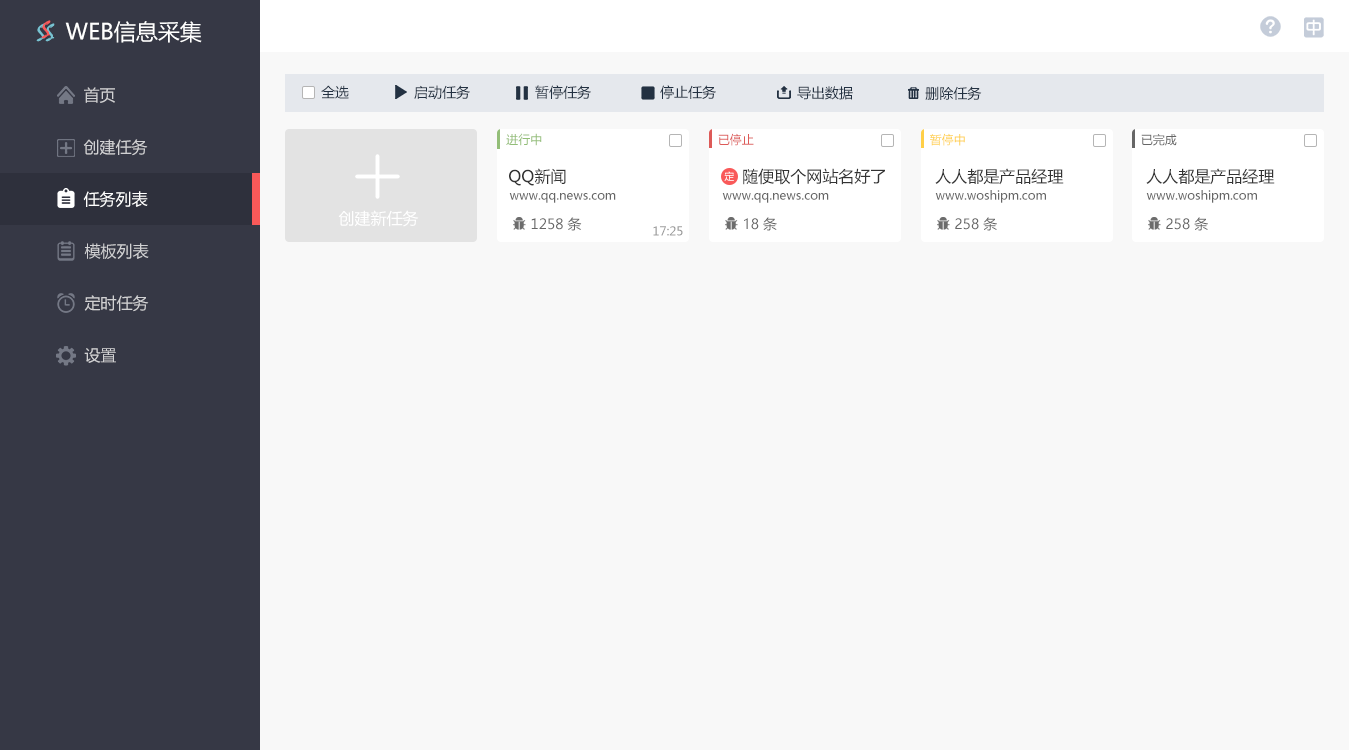
<style>
.page{position:relative;width:1349px;height:750px;background:#f8f8f8}
.page>*{position:absolute;margin:0}
.t1{font:24px "Mistral";color:#78c3d2}
.t2{font:24px "Mistral";color:#f95959}
.t3{font:22px "MicrosoftYaHei";color:#ffffff}
.t4{font:16px "MicrosoftYaHei";color:#d1d1d3}
.t5{font:14px "MicrosoftYaHei";color:#233142}
.t6{font:12px "MicrosoftYaHei";color:#93be78}
.t7{font:12px "MicrosoftYaHei";color:#dd5a58}
.t8{font:12px "MicrosoftYaHei"}
.t9{font:12px "MicrosoftYaHei";color:#666666}
.t10{font:16px "MicrosoftYaHei";color:#333333}
.t11{font:10px "MicrosoftYaHei";color:#ffffff}
.t12{font:16px "MicrosoftYaHei";color:#ffffff}
.t13{font:14px "MicrosoftYaHei";color:#666666}
.t14{font:12px "MicrosoftYaHei";color:#999999}
</style>
<div class="page">
<p class="t1" style="left:36px;top:23px;width:10px;height:19px">S</p>
<p class="t2" style="left:41px;top:20px;width:10px;height:19px">S</p>
<p class="t1" style="left:45px;top:23px;width:10px;height:19px">S</p>
<p class="t3" style="left:65px;top:21px;width:137px;height:22px">WEB信息采集</p>
<p class="t4" style="left:84px;top:87px;width:31px;height:16px">首页</p>
<p class="t5" style="left:321px;top:85px;width:28px;height:14px">全选</p>
<p class="t5" style="left:414px;top:85px;width:56px;height:15px">启动任务</p>
<p class="t5" style="left:535px;top:85px;width:56px;height:14px">暂停任务</p>
<p class="t5" style="left:660px;top:85px;width:56px;height:14px">停止任务</p>
<p class="t5" style="left:797px;top:86px;width:56px;height:14px">导出数据</p>
<p class="t5" style="left:925px;top:86px;width:57px;height:14px">删除任务</p>
<p class="t6" style="left:506px;top:133px;width:36px;height:13px">进行中</p>
<p class="t7" style="left:718px;top:133px;width:36px;height:13px">已停止</p>
<p class="t8" style="left:930px;top:133px;width:35px;height:13px">暂停中</p>
<p class="t9" style="left:1141px;top:134px;width:36px;height:12px">已完成</p>
<p class="t4" style="left:83px;top:139px;width:65px;height:17px">创建任务</p>
<p class="t10" style="left:509px;top:168px;width:57px;height:18px">QQ新闻</p>
<p class="t11" style="left:724px;top:171px;width:10px;height:10px">定</p>
<p class="t10" style="left:743px;top:168px;width:142px;height:17px">随便取个网站名好了</p>
<p class="t10" style="left:935px;top:168px;width:129px;height:17px">人人都是产品经理</p>
<p class="t10" style="left:1146px;top:168px;width:129px;height:17px">人人都是产品经理</p>
<p class="t12" style="left:83px;top:191px;width:65px;height:17px">任务列表</p>
<p class="t9" style="left:509px;top:193px;width:107px;height:10px">www.qq.news.com</p>
<p class="t9" style="left:722px;top:193px;width:107px;height:10px">www.qq.news.com</p>
<p class="t9" style="left:935px;top:190px;width:111px;height:13px">www.woshipm.com</p>
<p class="t9" style="left:1146px;top:190px;width:111px;height:13px">www.woshipm.com</p>
<p class="t12" style="left:338px;top:210px;width:81px;height:17px">创建新任务</p>
<p class="t13" style="left:531px;top:217px;width:51px;height:14px">1258 条</p>
<p class="t13" style="left:744px;top:217px;width:33px;height:14px">18 条</p>
<p class="t13" style="left:955px;top:217px;width:42px;height:14px">258 条</p>
<p class="t13" style="left:1166px;top:217px;width:42px;height:14px">258 条</p>
<p class="t14" style="left:653px;top:226px;width:30px;height:10px">17:25</p>
<p class="t4" style="left:84px;top:243px;width:65px;height:16px">模板列表</p>
<p class="t4" style="left:84px;top:295px;width:65px;height:17px">定时任务</p>
<p class="t4" style="left:84px;top:348px;width:32px;height:15px">设置</p>
</div>
